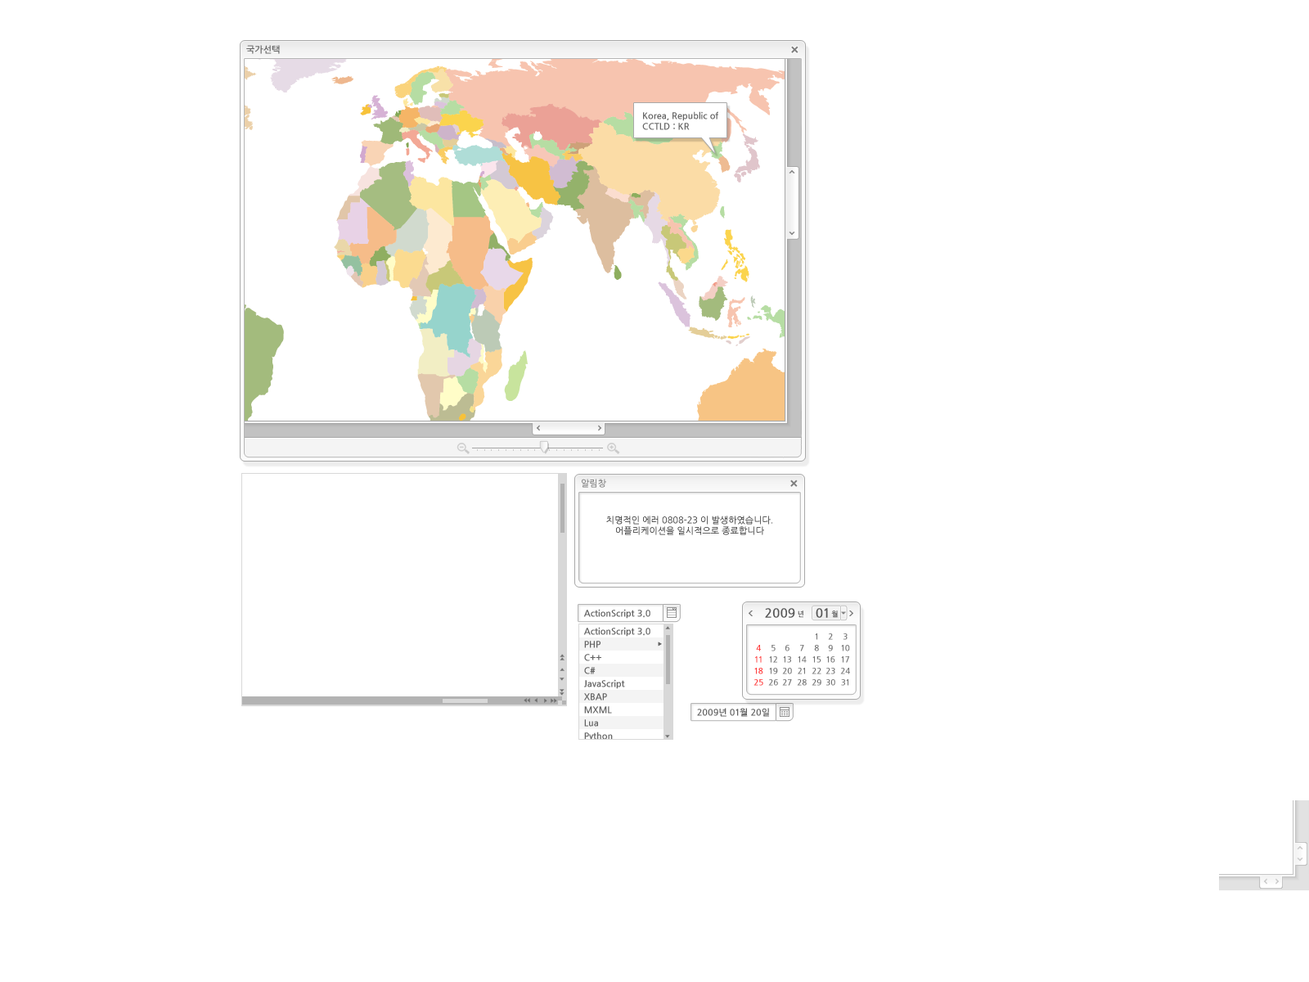
<style>
.page{position:relative;width:1309px;height:982px;background:#ffffff}
.page>*{position:absolute;margin:0}
.t1{font:9px "NanumGothicBold";color:#686868}
.t2{font:9px "NanumGothicBold";color:#646464}
.t3{font:9px "NanumGothic"}
.t4{font:9px "NanumGothicBold";color:#616161}
.t5{font:12.7px "NanumGothicBold";color:#575757}
.t6{font:7.1px "NanumGothicBold";color:#575757}
.t7{font:8.2px/11.5px "NanumGothicBold";color:#737373}
.t8{font:8.2px/11.5px "NanumGothicBold";color:#ff3b3b}
</style>
<div class="page">
<p class="t1" style="left:246px;top:45px;width:34px;height:9px">국가선택</p>
<p class="t2" style="left:642px;top:111px;width:76px;height:19px">Korea, Republic of <br>CCTLD : KR</p>
<p class="t3" style="left:582px;top:479px;width:24px;height:9px">알림창</p>
<p class="t3" style="left:606px;top:515px;width:166px;height:20px;text-align:center">치명적인 에러 0808-23 이 발생하였습니다.<br>어플리케이션을 일시적으로 종료합니다</p>
<p class="t4" style="left:583px;top:609px;width:67px;height:10px">ActionScript 3.0</p>
<p class="t5" style="left:765px;top:608px;width:38px;height:10px">2009<span class="t6"> 년</span></p>
<p class="t5" style="left:816px;top:608px;width:22px;height:10px">01<span class="t6"> 월</span></p>
<p class="t7" style="left:812px;top:633px;width:9px;height:53px;text-align:center">1<br>8<br>15<br>22<br>29</p>
<p class="t7" style="left:826px;top:633px;width:9px;height:53px;text-align:center">2<br>9<br>16<br>23<br>30</p>
<p class="t7" style="left:840px;top:633px;width:10px;height:53px;text-align:center">3<br>10<br>17<br>24<br>31</p>
<p class="t8" style="left:754px;top:645px;width:9px;height:41px;text-align:center">4<br>11<br>18<br>25</p>
<p class="t7" style="left:768px;top:645px;width:10px;height:41px;text-align:center">5<br>12<br>19<br>26</p>
<p class="t7" style="left:782px;top:645px;width:10px;height:41px;text-align:center">6<br>13<br>20<br>27</p>
<p class="t7" style="left:797px;top:645px;width:10px;height:41px;text-align:center">7<br>14<br>21<br>28</p>
<p class="t4" style="left:697px;top:708px;width:72px;height:9px">2009년 01월 20일</p>
</div>
